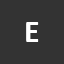
<style>
.page{position:relative;width:64px;height:64px;background:#333333}
.page>*{position:absolute;margin:0}
.t1{font:32px "Calibri-Bold";color:#ffffff}
</style>
<div class="page">
<p class="t1" style="left:26px;top:22px;width:13px;height:20px">E</p>
</div>
